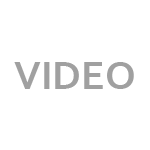
<style>
.page{position:relative;width:150px;height:150px;background:#ffffff}
.page>*{position:absolute;margin:0}
.t1{font:41.7px "Corbel-Bold";color:#a0a0a0}
</style>
<div class="page">
<p class="t1" style="left:14px;top:62px;width:120px;height:27px">VIDEO</p>
</div>
